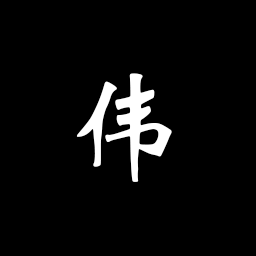
<style>
.page{position:relative;width:256px;height:256px;background:#000000}
.page>*{position:absolute;margin:0}
.t1{font:120px "STXinwei";color:#ffffff}
</style>
<div class="page">
<p class="t1" style="left:76px;top:73px;width:96px;height:109px">伟</p>
</div>
